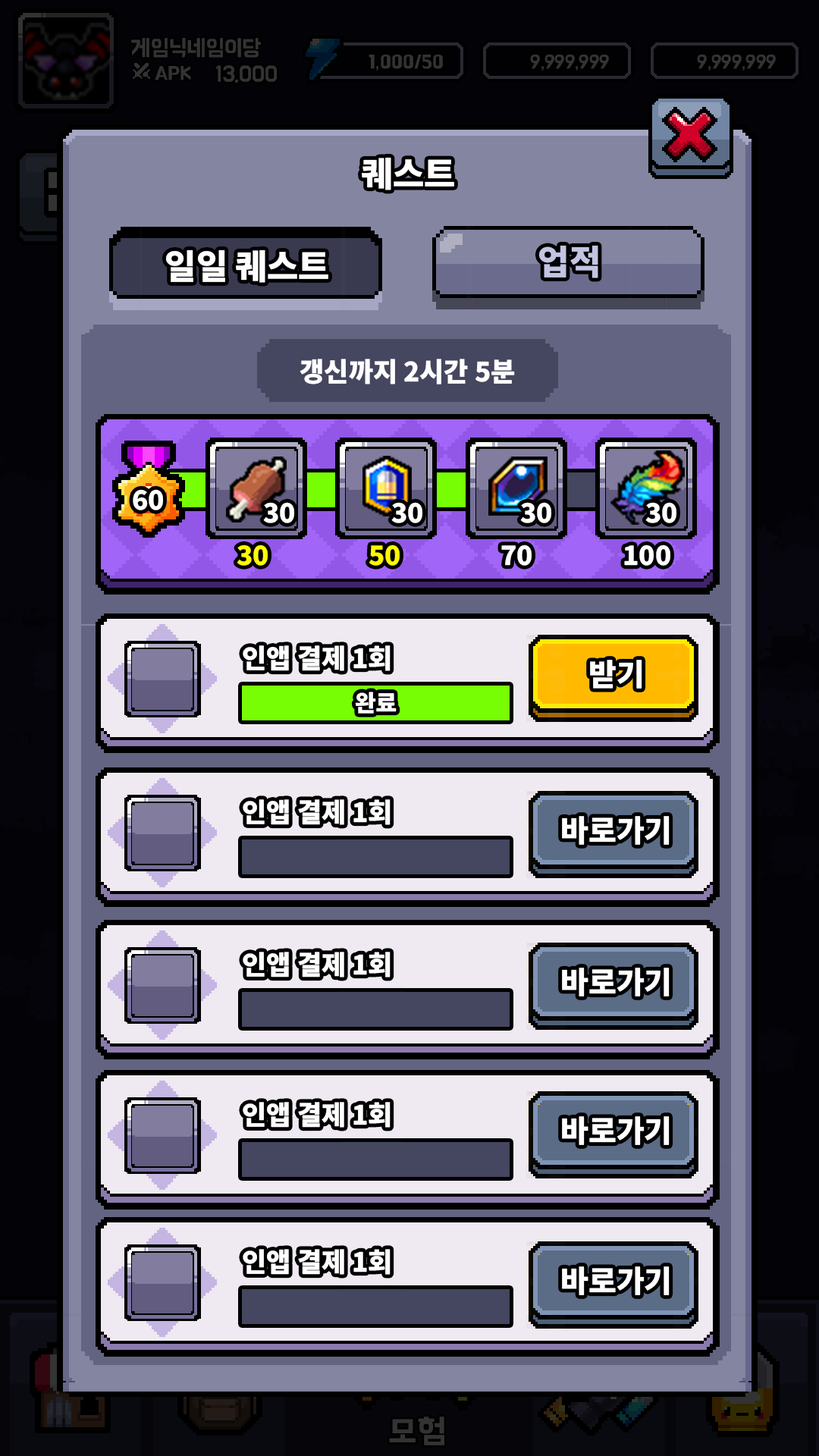
<style>
.page{position:relative;width:819px;height:1456px}
.page>*{position:absolute;margin:0}
.t1{font:34.1px "NotoSansKR-Black";color:#ffffff}
.t2{font:34.1px "NotoSansKR-Black";color:#c3c4e2}
.t3{font:26.5px "NotoSansKR-Black";color:#ffffff}
.t4{font:26.5px "NotoSansKR-Black";color:#fffc00}
.t5{font:26.5px "NotoSansKR-Black";color:#fcf900}
.t6{font:30.3px "NotoSansKR-Black";color:#ffffff}
.t7{font:22.8px "NotoSansKR-Black";color:#ffffff}
</style>
<div class="page">
<p class="t1" style="left:362px;top:157px;width:92px;height:33px">퀘스트</p>
<p class="t2" style="left:538px;top:245px;width:60px;height:33px">업적</p>
<p class="t1" style="left:165px;top:249px;width:163px;height:34px">일일 퀘스트</p>
<p class="t3" style="left:300px;top:359px;width:215px;height:25px">갱신까지 2시간 5분</p>
<p class="t3" style="left:133px;top:489px;width:31px;height:21px">60</p>
<p class="t3" style="left:263px;top:502px;width:32px;height:21px">30</p>
<p class="t3" style="left:391px;top:502px;width:32px;height:21px">30</p>
<p class="t3" style="left:520px;top:502px;width:32px;height:21px">30</p>
<p class="t3" style="left:645px;top:502px;width:32px;height:21px">30</p>
<p class="t4" style="left:237px;top:544px;width:31px;height:22px">30</p>
<p class="t5" style="left:369px;top:544px;width:31px;height:22px">50</p>
<p class="t3" style="left:501px;top:544px;width:31px;height:22px">70</p>
<p class="t3" style="left:624px;top:544px;width:47px;height:22px">100</p>
<p class="t3" style="left:243px;top:645px;width:148px;height:26px">인앱 결제 1회</p>
<p class="t6" style="left:590px;top:660px;width:52px;height:29px">받기</p>
<p class="t7" style="left:355px;top:692px;width:42px;height:22px">완료</p>
<p class="t6" style="left:562px;top:816px;width:108px;height:29px">바로가기</p>
<p class="t6" style="left:562px;top:968px;width:108px;height:28px">바로가기</p>
<p class="t6" style="left:562px;top:1116px;width:108px;height:29px">바로가기</p>
<p class="t6" style="left:562px;top:1266px;width:108px;height:29px">바로가기</p>
</div>
